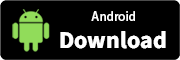
<style>
.page{position:relative;width:180px;height:60px;background:#000000}
.page>*{position:absolute;margin:0}
.t1{font:12px "AdobeHeitiStd-Regular";color:#ffffff}
.t2{font:24px "SourceSansRoman-Bold";color:#ffffff}
</style>
<div class="page">
<p class="t1" style="left:91px;top:11px;width:44px;height:10px">Android</p>
<p class="t2" style="left:60px;top:31px;width:106px;height:18px">Download</p>
</div>
